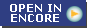
<style>
.page{position:relative;width:87px;height:28px;background:#2f3e82}
.page>*{position:absolute;margin:0}
.t1{font:10.5px/10px "Verdana-Bold";color:#ffffff}
</style>
<div class="page">
<p class="t1" style="left:10px;top:4px;width:51px;height:18px;text-align:center">OPEN IN<br>ENCORE</p>
</div>
